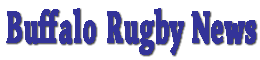
<style>
.page{position:relative;width:260px;height:60px;background:#ffffff}
.page>*{position:absolute;margin:0}
.t1{font:48px "ChaparralPro-Bold";color:#333399;font-weight:bold;scale:0.55 1}
</style>
<div class="page">
<p class="t1" style="left:6px;top:8px;width:250px;height:47px">Buffalo Rugby News</p>
</div>
